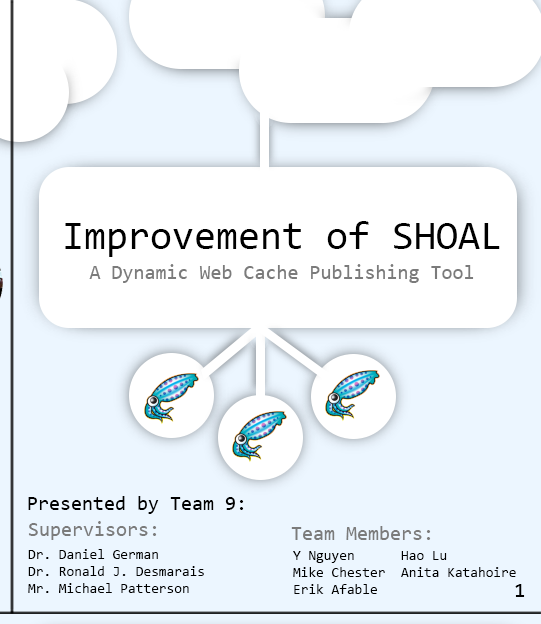
<style>
.page{position:relative;width:541px;height:624px;background:#ffffff}
.page>*{position:absolute;margin:0}
.t1{font:20px/30px "Consolas";color:#7b7b7b}
.t2{font:40px "Consolas";color:#000000}
.t3{font:20px "Consolas";color:#000000}
.t4{font:20px "Consolas";color:#7b7b7b}
.t5{font:14px "Consolas";color:#000000}
</style>
<div class="page">
<p class="t1" style="left:65px;top:221px;width:435px;height:62px;text-align:center"><span class="t2">Improvement of SHOAL<br></span>A Dynamic Web Cache Publishing Tool</p>
<p class="t3" style="left:28px;top:496px;width:216px;height:18px">Presented by Team 9:</p>
<p class="t4" style="left:28px;top:521px;width:129px;height:19px">Supervisors:</p>
<p class="t4" style="left:291px;top:526px;width:140px;height:14px">Team Members:</p>
<p class="t5" style="left:28px;top:549px;width:176px;height:44px">Dr. Daniel German<br>Dr. Ronald J. Desmarais<br>Mr. Michael Patterson</p>
<p class="t5" style="left:293px;top:551px;width:223px;height:43px">Y Nguyen  Hao Lu<br>Mike Chester Anita Katahoire <br>Erik Afable</p>
</div>
